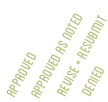
<style>
.page{position:relative;width:108px;height:102px;background:#ffffff}
.page>*{position:absolute;margin:0}
.t1{font:20px/22px "Blanch-Caps";color:#b9c181}
.t2{font:22px/22px "Blanch-Caps";color:#97a150}
</style>
<div class="page">
<p class="t1" style="left:6px;top:13px;width:101px;height:86px;rotate:-62deg"><span class="t2">    </span>approved<br>        approved as noted<br>             revise + resubmit<br>                 denied</p>
</div>
